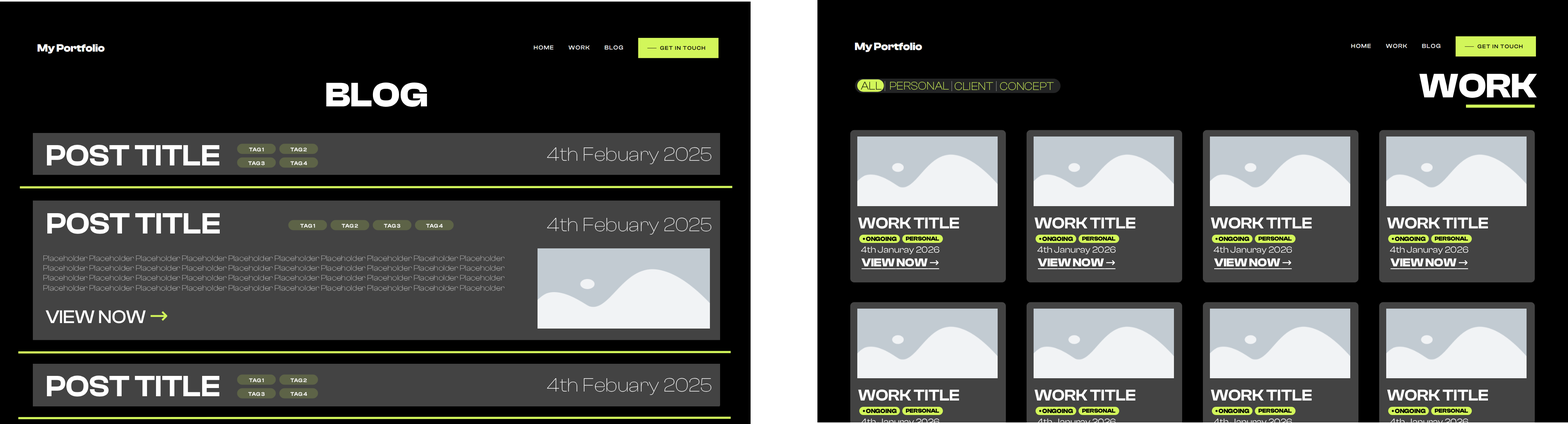
<style>
.page{position:relative;width:1568px;height:424px;background:#000000}
.page>*{position:absolute;margin:0}
.t1{font:35.1px "ClashDisplayVariable-Bold";color:#ffffff}
.t2{font:11.6px "ClashDisplayVariable-Light";color:#000000}
.t3{font:11.6px "ClashDisplayVariable-Light";color:#828282}
.t4{font:11.6px "ClashDisplayVariable-Light";color:#d2f65a}
.t5{font:30.3px "ClashDisplayVariable-Semibold";color:#ffffff}
.t6{font:5.5px "ClashDisplayVariable-Regular_581.000wght";color:#ffffff}
.t7{font:19.8px "ClashDisplayVariable-Extralight";color:#ffffff}
.t8{font:16.2px "ClashDisplayVariable-Semibold";color:#ffffff}
.t9{font:6.3px "ClashDisplayVariable-Regular_700.000wght";color:#000000}
.t10{font:5.9px "ClashDisplayVariable-Regular_700.000wght";color:#000000}
.t11{font:8.2px "ClashDisplayVariable-Extralight"}
.t12{font:9.2px "ClashDisplayVariable-Regular";color:#ffffff}
.t13{font:11.8px "ClashDisplayVariable-Bold";color:#ffffff;text-decoration:underline}
.t14{font:11.8px "DejaVuSans";color:#ffffff;text-decoration:underline}
.t15{font:18.9px "ClashDisplayVariable-Medium";color:#ffffff}
.t16{font:22.7px "DejaVuSans";color:#d2f65a}
</style>
<div class="page">
<p class="t1" style="left:1419px;top:73px;width:118px;height:25px">WORK</p>
<p class="t1" style="left:326px;top:82px;width:101px;height:25px">BLOG</p>
<p class="t2" style="left:861px;top:82px;width:21px;height:8px">ALL</p>
<p class="t3" style="left:884px;top:81px;width:1px;height:10px">|</p>
<p class="t4" style="left:890px;top:82px;width:59px;height:8px">PERSONAL</p>
<p class="t3" style="left:951px;top:81px;width:1px;height:10px">|</p>
<p class="t4" style="left:955px;top:82px;width:38px;height:8px">CLIENT</p>
<p class="t3" style="left:996px;top:81px;width:1px;height:10px">|</p>
<p class="t4" style="left:1000px;top:82px;width:54px;height:8px">CONCEPT</p>
<p class="t5" style="left:47px;top:145px;width:173px;height:21px">POST TITLE</p>
<p class="t6" style="left:249px;top:147px;width:15px;height:5px">TAG 1</p>
<p class="t6" style="left:290px;top:147px;width:17px;height:5px">TAG 2</p>
<p class="t7" style="left:547px;top:147px;width:164px;height:17px">4th Febuary 2025</p>
<p class="t6" style="left:248px;top:161px;width:17px;height:4px">TAG 3</p>
<p class="t6" style="left:290px;top:161px;width:17px;height:4px">TAG 4</p>
<p class="t5" style="left:47px;top:213px;width:173px;height:21px">POST TITLE</p>
<p class="t7" style="left:547px;top:217px;width:164px;height:18px">4th Febuary 2025</p>
<p class="t8" style="left:858px;top:217px;width:101px;height:12px">WORK TITLE</p>
<p class="t8" style="left:1034px;top:217px;width:102px;height:12px">WORK TITLE</p>
<p class="t8" style="left:1211px;top:217px;width:101px;height:12px">WORK TITLE</p>
<p class="t8" style="left:1387px;top:217px;width:101px;height:12px">WORK TITLE</p>
<p class="t6" style="left:300px;top:224px;width:15px;height:4px">TAG 1</p>
<p class="t6" style="left:342px;top:224px;width:16px;height:4px">TAG 2</p>
<p class="t6" style="left:384px;top:224px;width:16px;height:4px">TAG 3</p>
<p class="t6" style="left:426px;top:224px;width:17px;height:4px">TAG 4</p>
<p class="t9" style="left:863px;top:237px;width:34px;height:4px">• ONGOING</p>
<p class="t10" style="left:906px;top:236px;width:33px;height:5px">PERSONAL</p>
<p class="t9" style="left:1039px;top:237px;width:34px;height:4px">• ONGOING</p>
<p class="t10" style="left:1082px;top:236px;width:34px;height:5px">PERSONAL</p>
<p class="t9" style="left:1215px;top:237px;width:34px;height:4px">• ONGOING</p>
<p class="t10" style="left:1258px;top:236px;width:34px;height:5px">PERSONAL</p>
<p class="t9" style="left:1392px;top:237px;width:34px;height:4px">• ONGOING</p>
<p class="t10" style="left:1435px;top:236px;width:33px;height:5px">PERSONAL</p>
<p class="t11" style="left:43px;top:255px;width:462px;height:36px">Placeholder Placeholder Placeholder Placeholder Placeholder Placeholder Placeholder Placeholder Placeholder Placeholder <br>Placeholder Placeholder Placeholder Placeholder Placeholder Placeholder Placeholder Placeholder Placeholder Placeholder  <br>Placeholder Placeholder Placeholder Placeholder Placeholder Placeholder Placeholder Placeholder Placeholder Placeholder  <br>Placeholder Placeholder Placeholder Placeholder Placeholder Placeholder Placeholder Placeholder Placeholder Placeholder</p>
<p class="t12" style="left:861px;top:246px;width:78px;height:8px">4th Januray 2026</p>
<p class="t12" style="left:1037px;top:246px;width:79px;height:8px">4th Januray 2026</p>
<p class="t12" style="left:1213px;top:246px;width:79px;height:8px">4th Januray 2026</p>
<p class="t12" style="left:1390px;top:246px;width:78px;height:8px">4th Januray 2026</p>
<p class="t13" style="left:861px;top:258px;width:78px;height:11px">VIEW NOW <span class="t14">→</span></p>
<p class="t13" style="left:1038px;top:258px;width:78px;height:11px">VIEW NOW <span class="t14">→</span></p>
<p class="t13" style="left:1214px;top:258px;width:78px;height:11px">VIEW NOW <span class="t14">→</span></p>
<p class="t13" style="left:1390px;top:258px;width:78px;height:11px">VIEW NOW <span class="t14">→</span></p>
<p class="t15" style="left:45px;top:310px;width:122px;height:13px">VIEW NOW <span class="t16">→</span></p>
<p class="t5" style="left:47px;top:375px;width:173px;height:21px">POST TITLE</p>
<p class="t7" style="left:547px;top:378px;width:164px;height:17px">4th Febuary 2025</p>
<p class="t6" style="left:249px;top:378px;width:15px;height:4px">TAG 1</p>
<p class="t6" style="left:290px;top:378px;width:17px;height:4px">TAG 2</p>
<p class="t8" style="left:858px;top:389px;width:101px;height:12px">WORK TITLE</p>
<p class="t8" style="left:1034px;top:389px;width:102px;height:12px">WORK TITLE</p>
<p class="t8" style="left:1211px;top:389px;width:101px;height:12px">WORK TITLE</p>
<p class="t8" style="left:1387px;top:389px;width:101px;height:12px">WORK TITLE</p>
<p class="t6" style="left:248px;top:392px;width:17px;height:4px">TAG 3</p>
<p class="t6" style="left:290px;top:392px;width:17px;height:4px">TAG 4</p>
<p class="t9" style="left:863px;top:409px;width:34px;height:4px">• ONGOING</p>
<p class="t10" style="left:906px;top:408px;width:33px;height:5px">PERSONAL</p>
<p class="t9" style="left:1039px;top:409px;width:34px;height:4px">• ONGOING</p>
<p class="t10" style="left:1082px;top:408px;width:34px;height:5px">PERSONAL</p>
<p class="t9" style="left:1215px;top:409px;width:34px;height:4px">• ONGOING</p>
<p class="t10" style="left:1258px;top:408px;width:34px;height:5px">PERSONAL</p>
<p class="t9" style="left:1392px;top:409px;width:34px;height:4px">• ONGOING</p>
<p class="t10" style="left:1435px;top:408px;width:33px;height:5px">PERSONAL</p>
</div>
